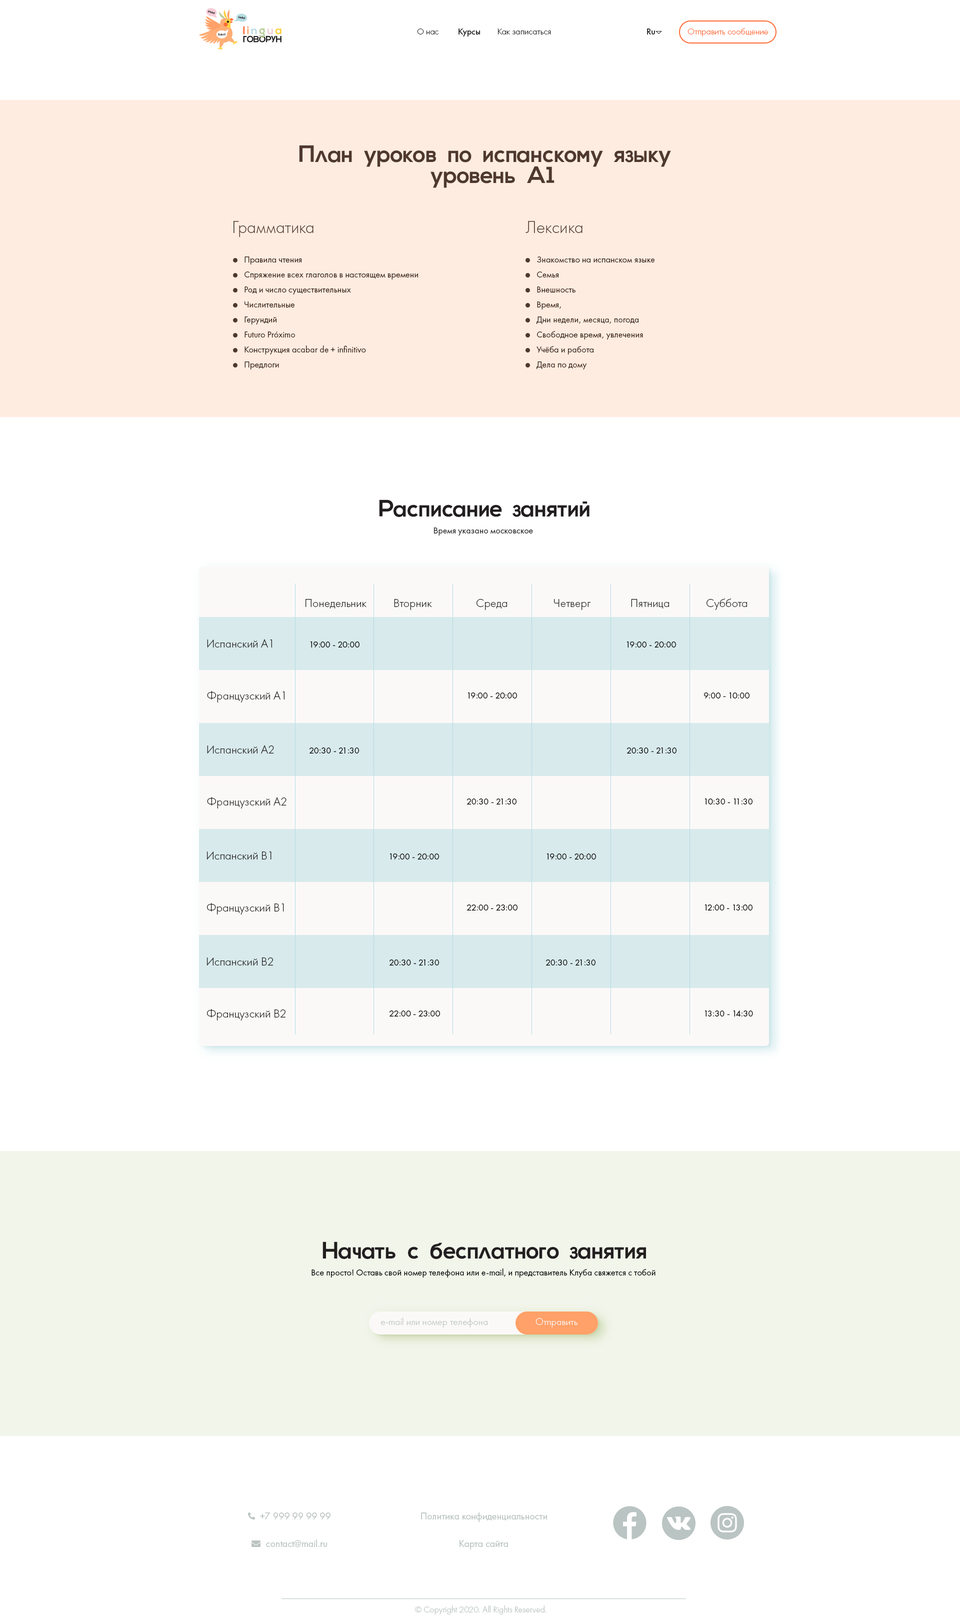
<style>
.page{position:relative;width:960px;height:1617px;background:#ffffff}
.page>*{position:absolute;margin:0}
.t1{font:9px "FuturaNewLight-Reg";color:#231f20}
.t2{font:9px "FuturaNewMedium-Reg";color:#231f20}
.t3{font:9px "FuturaNewLight-Reg";color:#ff6c37}
.t4{font:17.5px "NexaReplicaRUBold";letter-spacing:0.015em;color:#4f392e}
.t5{font:17.5px "FuturaNewLight-Reg";color:#4f392e}
.t6{font:9px/15px "FuturaNewBook-Reg";color:#332015}
.t7{font:17.5px "NexaReplicaRUBold";letter-spacing:0.015em;color:#231f20}
.t8{font:9px "FuturaNewBook-Reg";color:#231f20}
.t9{font:12px "FuturaNewLight-Reg";color:#231f20}
.t10{font:9px "FuturaNewBook-Reg";color:#000000}
.t11{font:10px "FuturaNewLight-Reg";color:#bac4c2}
.t12{font:10px "FuturaNewLight-Reg";color:#fbf9fa}
.t13{font:10px "FuturaNewBook-Reg";color:#bac4c2}
.t14{font:9px "FuturaNewLight-Reg";color:#bac4c2}
</style>
<div class="page">
<p class="t1" style="left:417px;top:28px;width:21px;height:6px">О нас</p>
<p class="t2" style="left:458px;top:28px;width:22px;height:8px">Курсы</p>
<p class="t1" style="left:498px;top:28px;width:53px;height:7px">Как записаться</p>
<p class="t2" style="left:647px;top:28px;width:8px;height:6px">Ru</p>
<p class="t3" style="left:688px;top:28px;width:80px;height:8px">Отправить сообщение</p>
<p class="t4" style="left:299px;top:145px;width:372px;height:43px">План уроков по испанскому языку<br>                                    уровень А1</p>
<p class="t5" style="left:234px;top:221px;width:80px;height:16px">Грамматика</p>
<p class="t5" style="left:526px;top:221px;width:56px;height:13px">Лексика</p>
<p class="t6" style="left:244px;top:256px;width:174px;height:114px">Правила чтения<br>Спряжение всех глаголов в настоящем времени<br>Род и число существительных<br>Числительные<br>Герундий<br>Futuro Próximo<br>Конструкция acabar de + infinitivo<br>Предлоги</p>
<p class="t6" style="left:536px;top:256px;width:118px;height:114px">Знакомство на испанском языке<br>Семья<br>Внешность<br>Время, <br>Дни недели, месяца, погода<br>Свободное время, увлечения<br>Учёба и работа<br>Дела по дому</p>
<p class="t7" style="left:379px;top:500px;width:211px;height:17px">Расписание занятий</p>
<p class="t8" style="left:434px;top:528px;width:99px;height:8px">Время указано московское</p>
<p class="t9" style="left:306px;top:599px;width:60px;height:9px">Понедельник</p>
<p class="t9" style="left:394px;top:599px;width:38px;height:11px">Вторник</p>
<p class="t9" style="left:476px;top:599px;width:31px;height:11px">Среда</p>
<p class="t9" style="left:554px;top:599px;width:37px;height:11px">Четверг</p>
<p class="t9" style="left:631px;top:599px;width:38px;height:9px">Пятница</p>
<p class="t9" style="left:706px;top:598px;width:41px;height:12px">Суббота</p>
<p class="t9" style="left:207px;top:639px;width:65px;height:9px">Испанский А1</p>
<p class="t10" style="left:310px;top:642px;width:50px;height:6px">19:00 - 20:00</p>
<p class="t10" style="left:626px;top:642px;width:50px;height:6px">19:00 - 20:00</p>
<p class="t9" style="left:207px;top:691px;width:77px;height:11px">Французский А1</p>
<p class="t10" style="left:468px;top:692px;width:49px;height:6px">19:00 - 20:00</p>
<p class="t10" style="left:704px;top:692px;width:46px;height:6px">9:00 - 10:00</p>
<p class="t9" style="left:207px;top:745px;width:67px;height:9px">Испанский А2</p>
<p class="t10" style="left:309px;top:748px;width:50px;height:6px">20:30 - 21:30</p>
<p class="t10" style="left:626px;top:748px;width:50px;height:6px">20:30 - 21:30</p>
<p class="t9" style="left:207px;top:797px;width:79px;height:11px">Французский А2</p>
<p class="t10" style="left:466px;top:798px;width:50px;height:6px">20:30 - 21:30</p>
<p class="t10" style="left:704px;top:798px;width:48px;height:6px">10:30 - 11:30</p>
<p class="t9" style="left:207px;top:852px;width:65px;height:8px">Испанский B1</p>
<p class="t10" style="left:390px;top:854px;width:49px;height:6px">19:00 - 20:00</p>
<p class="t10" style="left:546px;top:854px;width:50px;height:6px">19:00 - 20:00</p>
<p class="t9" style="left:207px;top:903px;width:77px;height:11px">Французский B1</p>
<p class="t10" style="left:466px;top:904px;width:52px;height:6px">22:00 - 23:00</p>
<p class="t10" style="left:704px;top:904px;width:48px;height:6px">12:00 - 13:00</p>
<p class="t9" style="left:207px;top:958px;width:66px;height:8px">Испанский B2</p>
<p class="t10" style="left:389px;top:960px;width:50px;height:6px">20:30 - 21:30</p>
<p class="t10" style="left:546px;top:960px;width:50px;height:6px">20:30 - 21:30</p>
<p class="t9" style="left:207px;top:1009px;width:79px;height:11px">Французский B2</p>
<p class="t10" style="left:389px;top:1010px;width:51px;height:6px">22:00 - 23:00</p>
<p class="t10" style="left:704px;top:1010px;width:49px;height:6px">13:30 - 14:30</p>
<p class="t7" style="left:322px;top:1242px;width:324px;height:17px">Начать с бесплатного занятия</p>
<p class="t10" style="left:312px;top:1268px;width:344px;height:10px">Все просто! Оставь свой номер телефона или e-mail, и представитель Клуба свяжется с тобой</p>
<p class="t11" style="left:380px;top:1318px;width:108px;height:10px">e-mail или номер телефона</p>
<p class="t12" style="left:536px;top:1318px;width:42px;height:10px">Отправить</p>
<p class="t13" style="left:260px;top:1512px;width:70px;height:8px">+7 999 99 99 99</p>
<p class="t13" style="left:421px;top:1512px;width:126px;height:10px">Политика конфиденциальности</p>
<p class="t13" style="left:266px;top:1540px;width:61px;height:8px">contact@mail.ru</p>
<p class="t13" style="left:460px;top:1540px;width:48px;height:10px">Карта сайта</p>
<p class="t14" style="left:415px;top:1606px;width:131px;height:8px">© Copyright 2020. All Rights Reserved.</p>
</div>
